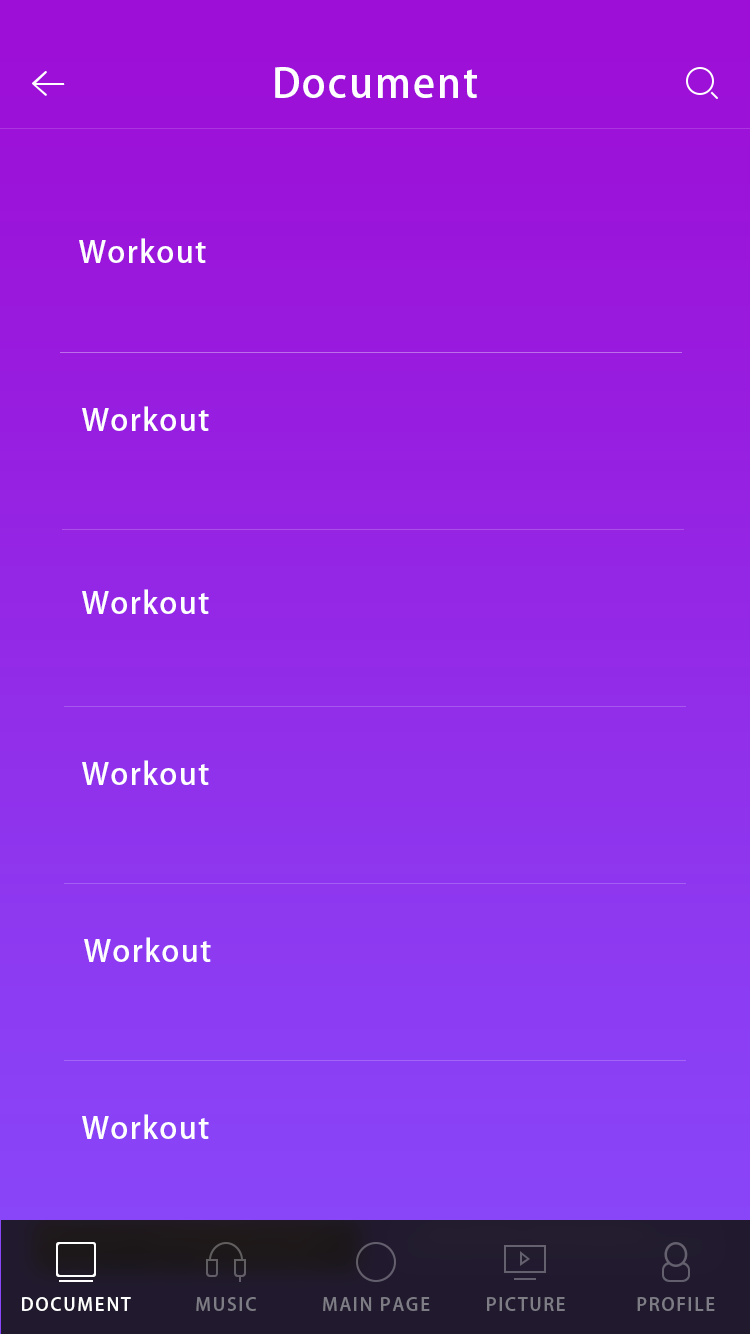
<style>
.page{position:relative;width:750px;height:1334px}
.page>*{position:absolute;margin:0}
.t1{font:40px "AdobeHeitiStd-Regular";letter-spacing:0.05em;color:#ffffff}
.t2{font:30px "AdobeHeitiStd-Regular";letter-spacing:0.05em;color:#ffffff}
.t3{font:18px "AdobeHeitiStd-Regular";letter-spacing:0.1em;color:#ffffff;text-transform:uppercase}
.t4{font:18px "AdobeHeitiStd-Regular";letter-spacing:0.1em;color:#7e7c84;text-transform:uppercase}
</style>
<div class="page">
<p class="t1" style="left:275px;top:67px;width:202px;height:31px">Document</p>
<p class="t2" style="left:79px;top:238px;width:127px;height:25px">Workout</p>
<p class="t2" style="left:82px;top:406px;width:127px;height:25px">Workout</p>
<p class="t2" style="left:82px;top:589px;width:127px;height:25px">Workout</p>
<p class="t2" style="left:82px;top:760px;width:127px;height:25px">Workout</p>
<p class="t2" style="left:84px;top:937px;width:127px;height:25px">Workout</p>
<p class="t2" style="left:82px;top:1114px;width:127px;height:25px">Workout</p>
<p class="t3" style="left:22px;top:1297px;width:109px;height:14px">document</p>
<p class="t4" style="left:196px;top:1297px;width:60px;height:14px">music</p>
<p class="t4" style="left:323px;top:1297px;width:107px;height:14px">main page</p>
<p class="t4" style="left:487px;top:1297px;width:78px;height:14px">picture</p>
<p class="t4" style="left:637px;top:1297px;width:78px;height:14px">profile</p>
</div>
